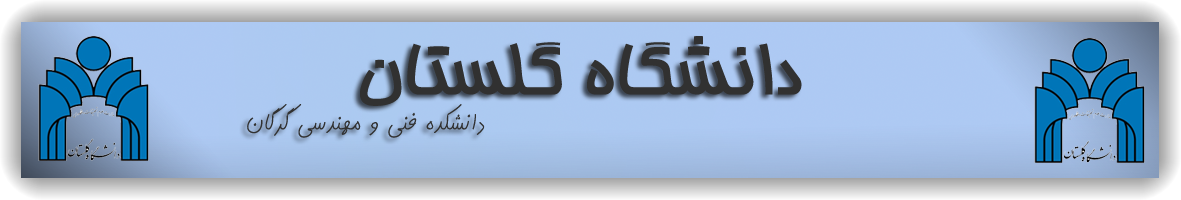
<style>
.page{position:relative;width:1181px;height:200px}
.page>*{position:absolute;margin:0}
.t1{font:80px "BHoma";color:#313131}
.t2{font:33.3px "2Kamran";color:#313131}
</style>
<div class="page">
<p class="t1" style="left:360px;top:36px;width:442px;height:70px">دانشگاه گلستان</p>
<p class="t2" style="left:247px;top:104px;width:238px;height:34px">دانشکده فنی و مهندسی گرگان</p>
</div>
